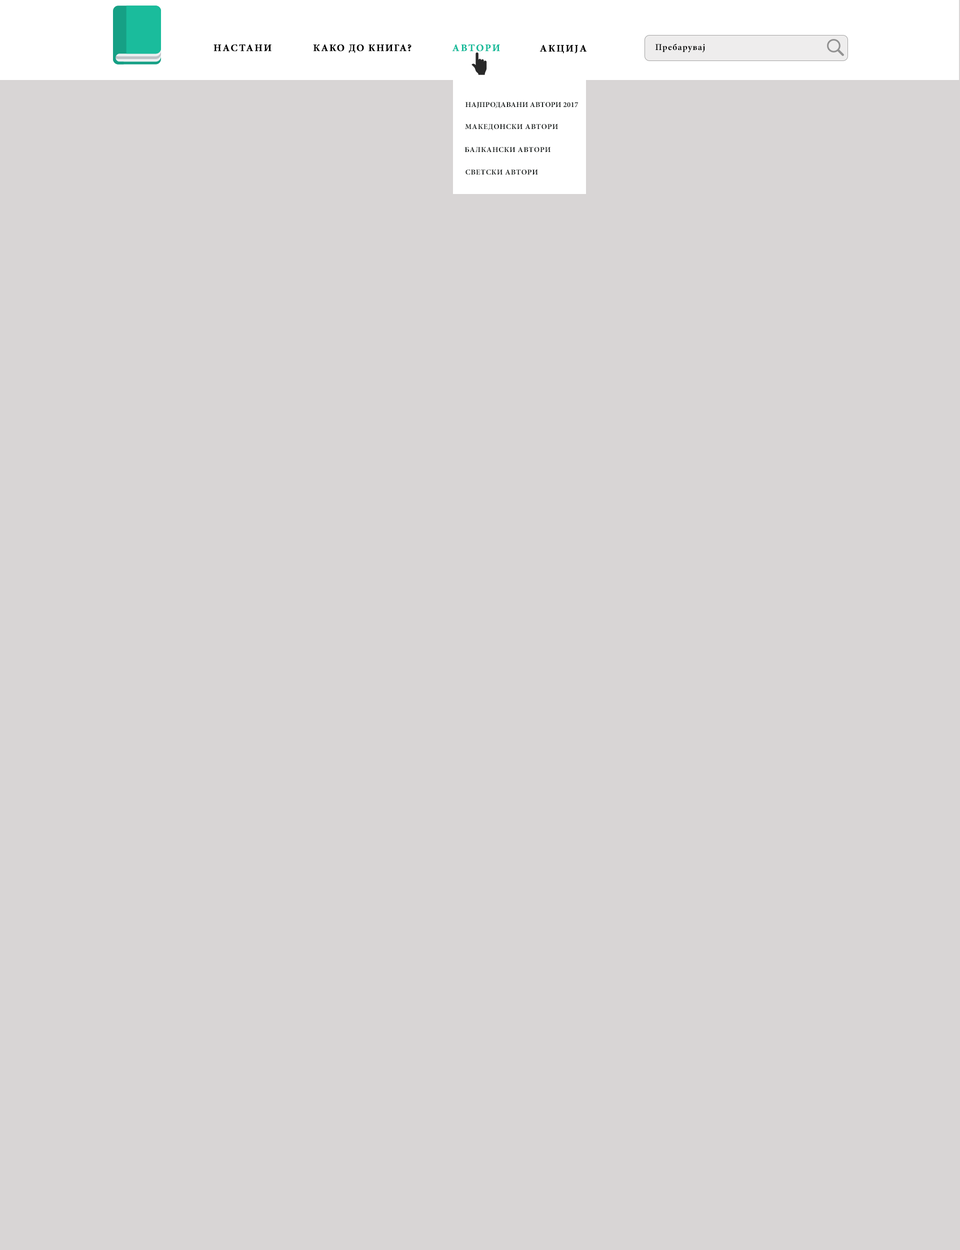
<style>
.page{position:relative;width:960px;height:1250px;background:#d8d5d5}
.page>*{position:absolute;margin:0}
.t1{font:10px "MinionPro-Bold";letter-spacing:0.1em;color:#040404;text-transform:uppercase;font-weight:bold}
.t2{font:10px "MinionPro-Bold";letter-spacing:0.075em;color:#040404;text-transform:uppercase;font-weight:bold}
.t3{font:10px "MinionPro-Bold";letter-spacing:0.1em;color:#1abc9c;text-transform:uppercase;font-weight:bold}
.t4{font:9px "MinionPro-Bold";letter-spacing:0.05em;color:#040404;font-variant:small-caps}
.t5{font:7.5px "MinionPro-Bold";letter-spacing:0.01em;color:#181d1c;text-transform:uppercase}
.t6{font:7.5px "MinionPro-Bold";letter-spacing:0.05em;color:#181d1c;text-transform:uppercase}
</style>
<div class="page">
<p class="t1" style="left:214px;top:44px;width:58px;height:8px">настани</p>
<p class="t2" style="left:313px;top:44px;width:99px;height:9px">како до книга?</p>
<p class="t3" style="left:452px;top:44px;width:48px;height:8px">автори</p>
<p class="t1" style="left:540px;top:44px;width:47px;height:10px">акција</p>
<p class="t4" style="left:656px;top:44px;width:49px;height:8px">Пребарувај</p>
<p class="t5" style="left:466px;top:102px;width:112px;height:6px">најпродавани автори 2017</p>
<p class="t6" style="left:465px;top:124px;width:93px;height:6px">македонски автори</p>
<p class="t6" style="left:464px;top:147px;width:86px;height:5px">балкански автори</p>
<p class="t6" style="left:466px;top:170px;width:72px;height:5px">светски автори</p>
</div>
